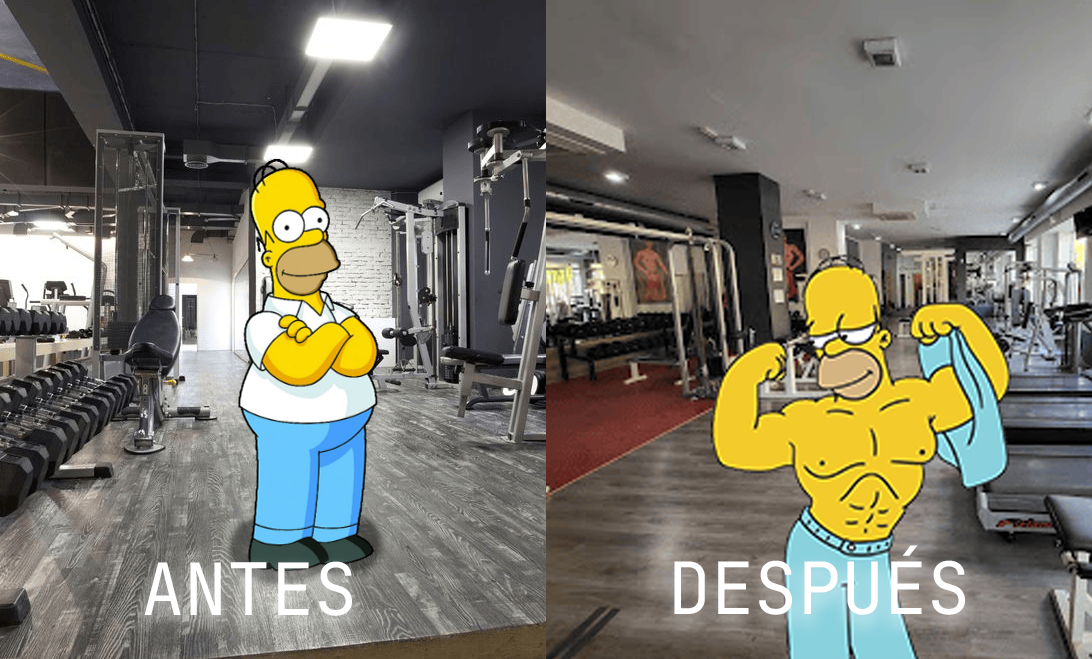
<style>
.page{position:relative;width:1092px;height:659px}
.page>*{position:absolute;margin:0}
.t1{font:72px "JetBrainsMono-Regular";color:#ffffff}
</style>
<div class="page">
<p class="t1" style="left:674px;top:545px;width:291px;height:70px">DESPUÉS</p>
<p class="t1" style="left:144px;top:561px;width:208px;height:55px">ANTES</p>
</div>
